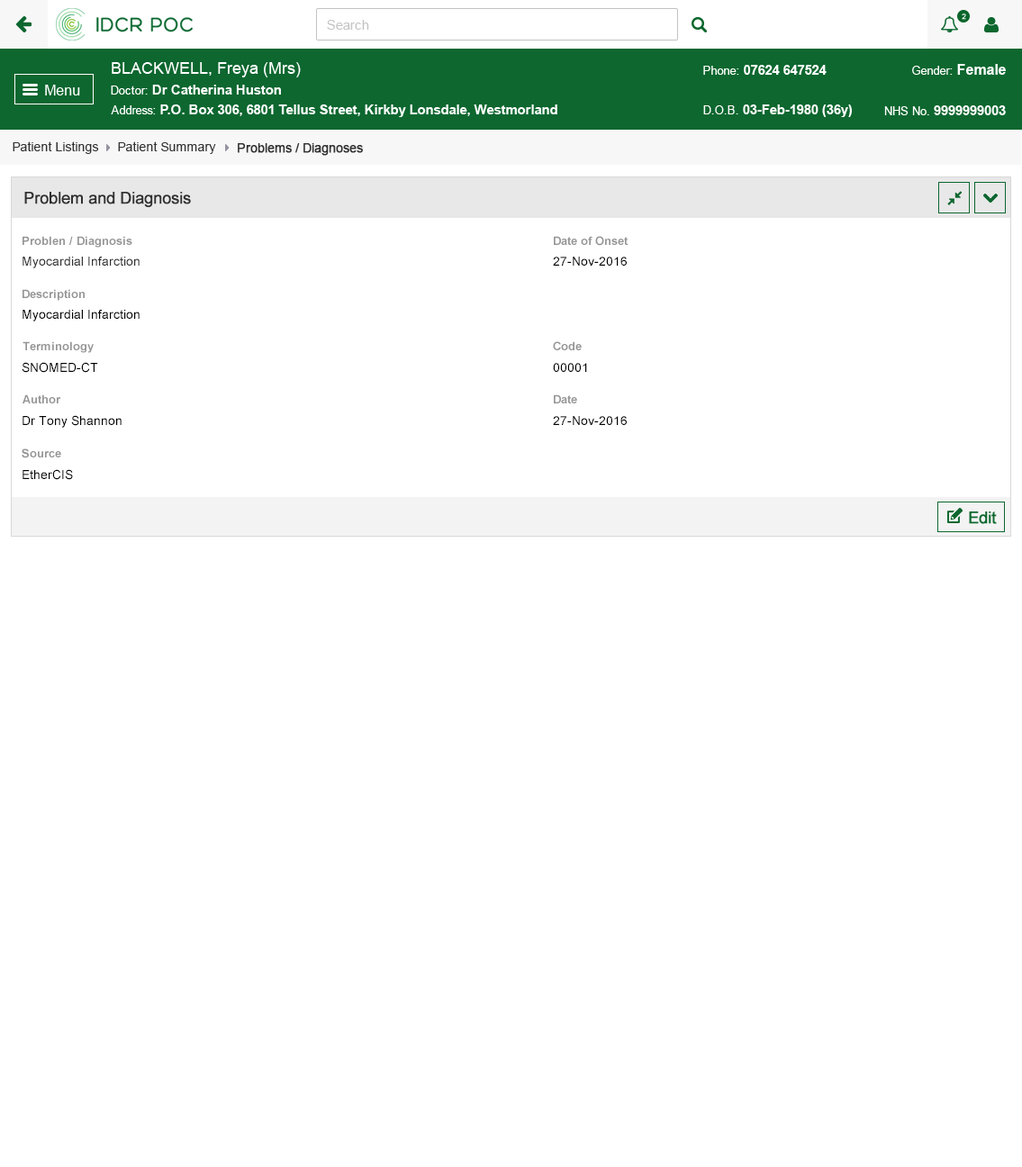
<style>
.page{position:relative;width:1022px;height:1167px;background:#ffffff}
.page>*{position:absolute;margin:0}
.t1{font:12.6px "ArialMT";color:#313131}
.t2{font:12.6px "ArialMT";color:#313131;font-weight:bold}
.t3{font:16.2px "ArialMT";color:#303030;font-weight:bold}
.t4{font:11.7px "Arial-BoldMT";color:#959595}
.t5{font:12.6px "ArialMT";color:#303030}
.t6{font:12.6px "ArialMT";color:#000000}
</style>
<div class="page">
<p class="t1" style="left:13px;top:141px;width:86px;height:13px">Patient Listings</p>
<p class="t1" style="left:118px;top:141px;width:98px;height:13px">Patient Summary</p>
<p class="t2" style="left:238px;top:143px;width:125px;height:13px">Problems / Diagnoses</p>
<p class="t3" style="left:24px;top:192px;width:167px;height:15px">Problem and Diagnosis</p>
<p class="t4" style="left:23px;top:236px;width:109px;height:12px">Problen / Diagnosis</p>
<p class="t4" style="left:554px;top:236px;width:74px;height:10px">Date of Onset</p>
<p class="t5" style="left:23px;top:257px;width:117px;height:11px">Myocardial Infarction</p>
<p class="t6" style="left:553px;top:257px;width:74px;height:9px">27-Nov-2016</p>
<p class="t4" style="left:23px;top:289px;width:62px;height:12px">Description</p>
<p class="t6" style="left:23px;top:310px;width:117px;height:11px">Myocardial Infarction</p>
<p class="t4" style="left:23px;top:341px;width:71px;height:12px">Terminology</p>
<p class="t4" style="left:553px;top:341px;width:29px;height:9px">Code</p>
<p class="t6" style="left:22px;top:362px;width:76px;height:11px">SNOMED-CT</p>
<p class="t6" style="left:553px;top:363px;width:34px;height:9px">00001</p>
<p class="t4" style="left:23px;top:394px;width:38px;height:9px">Author</p>
<p class="t4" style="left:554px;top:394px;width:23px;height:9px">Date</p>
<p class="t6" style="left:23px;top:415px;width:99px;height:13px">Dr Tony Shannon</p>
<p class="t6" style="left:553px;top:416px;width:74px;height:9px">27-Nov-2016</p>
<p class="t4" style="left:22px;top:448px;width:39px;height:10px">Source</p>
<p class="t6" style="left:23px;top:469px;width:50px;height:11px">EtherCIS</p>
</div>
